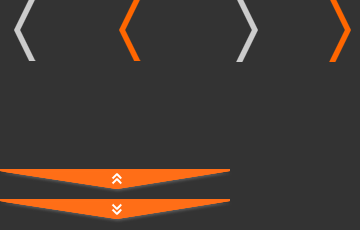
<style>
.page{position:relative;width:360px;height:230px;background:#333333}
.page>*{position:absolute;margin:0}
.t1{font:30px "RTWSYueGoTrial-Regular";color:#ffffff}
</style>
<div class="page">
<p class="t1" style="left:111px;top:173px;width:11px;height:7px">^</p>
<p class="t1" style="left:111px;top:178px;width:11px;height:7px">^</p>
<p class="t1" style="left:111px;top:208px;width:11px;height:7px">^</p>
<p class="t1" style="left:111px;top:203px;width:11px;height:7px">^</p>
</div>
